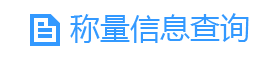
<style>
.page{position:relative;width:260px;height:60px;background:#ffffff}
.page>*{position:absolute;margin:0}
.t1{font:30px "MicrosoftYaHei";color:#3399ff}
</style>
<div class="page">
<p class="t1" style="left:70px;top:13px;width:179px;height:30px">称量信息查询</p>
</div>
